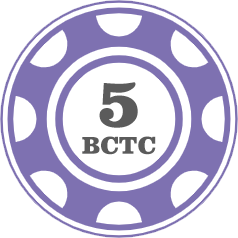
<style>
.page{position:relative;width:238px;height:238px;background:#ffffff}
.page>*{position:absolute;margin:0}
.t1{font:70px "ClarendonBT-Black";color:#5b5b5b}
.t2{font:25px "ClarendonBT-Black";color:#5b5b5b}
</style>
<div class="page">
<p class="t1" style="left:99px;top:82px;width:39px;height:46px">5</p>
<p class="t2" style="left:82px;top:136px;width:74px;height:19px">BCTC</p>
</div>
